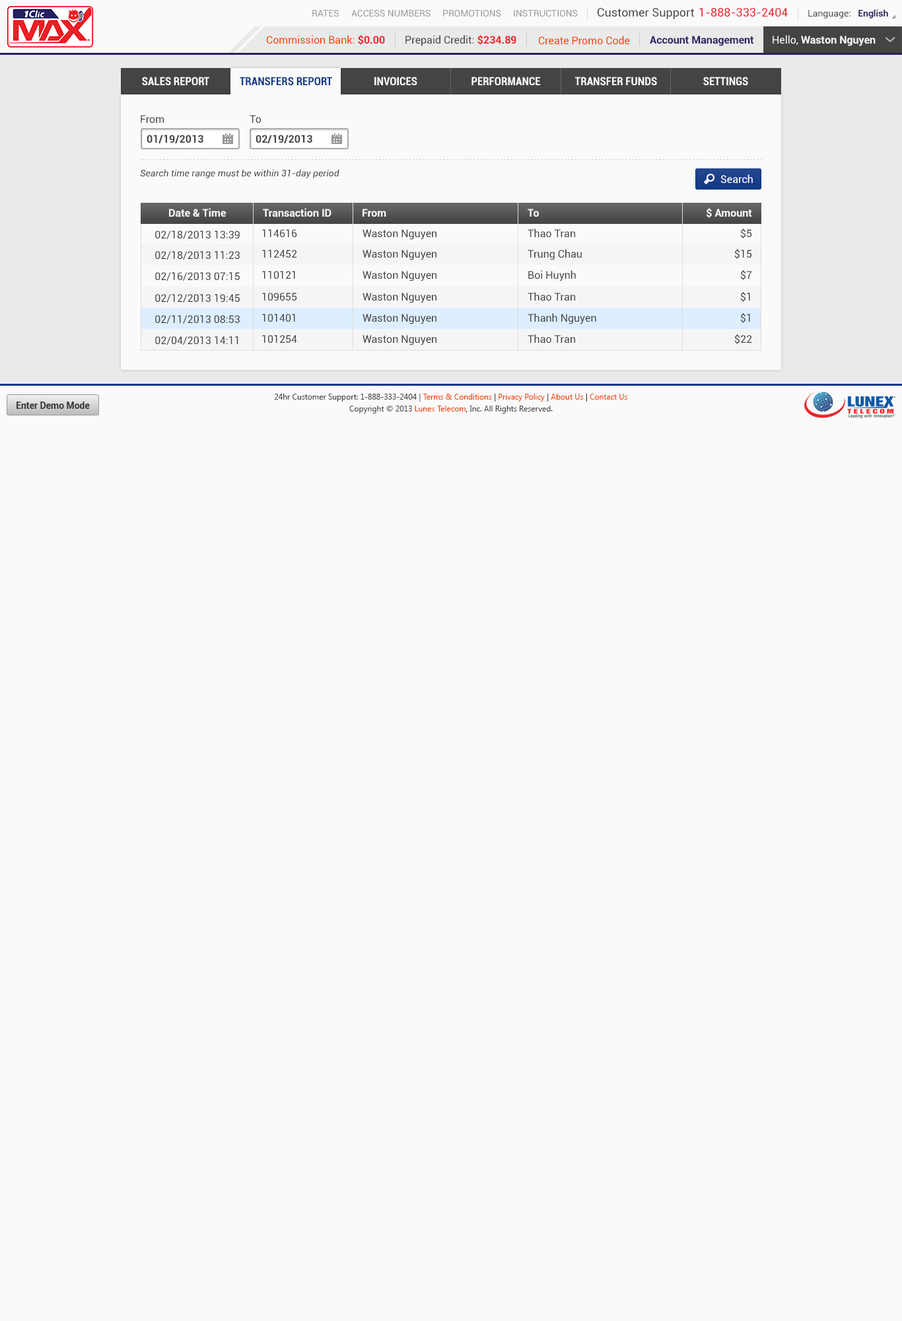
<style>
.page{position:relative;width:902px;height:1321px;background:#fafafa}
.page>*{position:absolute;margin:0}
.t1{font:9.2px "Roboto-Regular";color:#999999}
.t2{font:11.6px "Roboto-Regular";color:#444444}
.t3{font:11.6px "Roboto-Regular";color:#ec2029}
.t4{font:9.2px "Roboto-Regular";color:#444444}
.t5{font:9.2px "Roboto-Bold";color:#262262}
.t6{font:10.6px "Roboto-Regular";color:#ee4400}
.t7{font:10.6px "Roboto-Bold";color:#ec2028}
.t8{font:10.6px "Roboto-Regular";color:#444444}
.t9{font:10.6px "Roboto-Bold";color:#262262}
.t10{font:10.6px "Roboto-Bold";color:#fafafa}
.t11{font:10.6px "Roboto-Regular";color:#fafafa}
.t12{font:11.2px "Roboto-BoldCondensed";color:#fafafa}
.t13{font:11.2px "Roboto-BoldCondensed";color:#123785}
.t14{font:10.6px "Roboto-Bold";color:#444444}
.t15{font:9.2px "Roboto-Italic";color:#444444}
.t16{font:10.6px "Roboto-Regular";color:#ffffff}
.t17{font:9.2px "Roboto-Bold";color:#333333}
.t18{font:7.9px/11.9px "SegoeUI";color:#444444}
.t19{font:7.9px/11.9px "SegoeUI";color:#ee4400}
.t20{font:7.9px/11.9px "SegoeUI";color:#333333}
</style>
<div class="page">
<p class="t1" style="left:312px;top:10px;width:27px;height:7px">RATES</p>
<p class="t1" style="left:351px;top:10px;width:80px;height:7px">ACCESS NUMBERS</p>
<p class="t1" style="left:443px;top:10px;width:58px;height:7px">PROMOTIONS</p>
<p class="t1" style="left:514px;top:10px;width:64px;height:7px">INSTRUCTIONS</p>
<p class="t2" style="left:598px;top:8px;width:96px;height:11px">Customer Support</p>
<p class="t3" style="left:700px;top:8px;width:88px;height:9px">1-888-333-2404</p>
<p class="t4" style="left:809px;top:9px;width:80px;height:9px">Language:   <span class="t5">English</span></p>
<p class="t6" style="left:267px;top:35px;width:118px;height:10px">Commission Bank: <span class="t7">$0.00</span></p>
<p class="t8" style="left:406px;top:35px;width:111px;height:11px">Prepaid Credit: <span class="t7">$234.89</span></p>
<p class="t6" style="left:539px;top:36px;width:91px;height:9px">Create Promo Code</p>
<p class="t9" style="left:650px;top:36px;width:104px;height:10px">Account Management</p>
<p class="t10" style="left:773px;top:35px;width:103px;height:11px"><span class="t11">Hello, </span>Waston Nguyen</p>
<p class="t12" style="left:142px;top:77px;width:67px;height:8px">SALES REPORT</p>
<p class="t13" style="left:240px;top:77px;width:92px;height:8px">TRANSFERS REPORT</p>
<p class="t12" style="left:375px;top:77px;width:43px;height:8px">INVOICES</p>
<p class="t12" style="left:472px;top:77px;width:68px;height:8px">PERFORMANCE</p>
<p class="t12" style="left:575px;top:77px;width:82px;height:8px">TRANSFER FUNDS</p>
<p class="t12" style="left:704px;top:77px;width:45px;height:8px">SETTINGS</p>
<p class="t8" style="left:141px;top:115px;width:23px;height:8px">From</p>
<p class="t8" style="left:250px;top:115px;width:11px;height:8px">To</p>
<p class="t14" style="left:147px;top:135px;width:56px;height:8px">01/19/2013</p>
<p class="t14" style="left:256px;top:135px;width:56px;height:8px">02/19/2013</p>
<p class="t15" style="left:140px;top:169px;width:200px;height:9px">Search time range must be within 31-day period</p>
<p class="t16" style="left:721px;top:174px;width:32px;height:10px">Search</p>
<p class="t10" style="left:169px;top:208px;width:57px;height:9px">Date &amp; Time</p>
<p class="t10" style="left:263px;top:208px;width:69px;height:9px">Transaction ID</p>
<p class="t10" style="left:363px;top:209px;width:23px;height:8px">From</p>
<p class="t10" style="left:528px;top:209px;width:11px;height:8px">To</p>
<p class="t10" style="left:706px;top:208px;width:46px;height:10px">$ Amount</p>
<p class="t8" style="left:155px;top:231px;width:85px;height:8px">02/18/2013 13:39</p>
<p class="t8" style="left:262px;top:229px;width:35px;height:8px">114616</p>
<p class="t8" style="left:363px;top:229px;width:74px;height:11px">Waston Nguyen</p>
<p class="t8" style="left:528px;top:229px;width:47px;height:9px">Thao Tran</p>
<p class="t8" style="left:741px;top:229px;width:11px;height:9px">$5</p>
<p class="t8" style="left:155px;top:251px;width:85px;height:9px">02/18/2013 11:23</p>
<p class="t8" style="left:262px;top:250px;width:35px;height:8px">112452</p>
<p class="t8" style="left:363px;top:250px;width:74px;height:10px">Waston Nguyen</p>
<p class="t8" style="left:528px;top:249px;width:54px;height:11px">Trung Chau</p>
<p class="t8" style="left:735px;top:249px;width:17px;height:10px">$15</p>
<p class="t8" style="left:155px;top:272px;width:85px;height:9px">02/16/2013 07:15</p>
<p class="t8" style="left:262px;top:271px;width:33px;height:8px">110121</p>
<p class="t8" style="left:363px;top:271px;width:74px;height:10px">Waston Nguyen</p>
<p class="t8" style="left:529px;top:270px;width:47px;height:11px">Boi Huynh</p>
<p class="t8" style="left:741px;top:270px;width:11px;height:10px">$7</p>
<p class="t8" style="left:155px;top:294px;width:85px;height:9px">02/12/2013 19:45</p>
<p class="t8" style="left:262px;top:293px;width:35px;height:8px">109655</p>
<p class="t8" style="left:363px;top:293px;width:74px;height:10px">Waston Nguyen</p>
<p class="t8" style="left:528px;top:292px;width:47px;height:9px">Thao Tran</p>
<p class="t8" style="left:741px;top:292px;width:10px;height:10px">$1</p>
<p class="t8" style="left:155px;top:315px;width:85px;height:9px">02/11/2013 08:53</p>
<p class="t8" style="left:262px;top:314px;width:33px;height:8px">101401</p>
<p class="t8" style="left:363px;top:314px;width:74px;height:10px">Waston Nguyen</p>
<p class="t8" style="left:528px;top:313px;width:69px;height:11px">Thanh Nguyen</p>
<p class="t8" style="left:741px;top:313px;width:10px;height:10px">$1</p>
<p class="t8" style="left:155px;top:336px;width:83px;height:9px">02/04/2013 14:11</p>
<p class="t8" style="left:262px;top:335px;width:35px;height:8px">101254</p>
<p class="t8" style="left:363px;top:335px;width:74px;height:11px">Waston Nguyen</p>
<p class="t8" style="left:528px;top:334px;width:47px;height:10px">Thao Tran</p>
<p class="t8" style="left:735px;top:334px;width:17px;height:10px">$22</p>
<p class="t17" style="left:17px;top:402px;width:73px;height:7px">Enter Demo Mode</p>
<p class="t18" style="left:274px;top:394px;width:354px;height:20px;text-align:center">24hr Customer Support: 1-888-333-2404 | <span class="t19">Terms &amp; Conditions</span><span class="t20"> | </span><span class="t19">Privacy Policy</span><span class="t20"> | </span><span class="t19">About Us</span><span class="t20"> | </span><span class="t19">Contact Us<br></span>Copyright © 2013 <span class="t19">Lunex Telecom</span><span class="t20">,</span> Inc. All Rights Reserved.</p>
</div>
